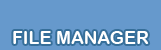
<style>
.page{position:relative;width:161px;height:50px;background:#6699cc}
.page>*{position:absolute;margin:0}
.t1{font:18px "ArialRoundedMTBold";color:#ffffff}
</style>
<div class="page">
<p class="t1" style="left:13px;top:31px;width:136px;height:13px">FILE MANAGER</p>
</div>
